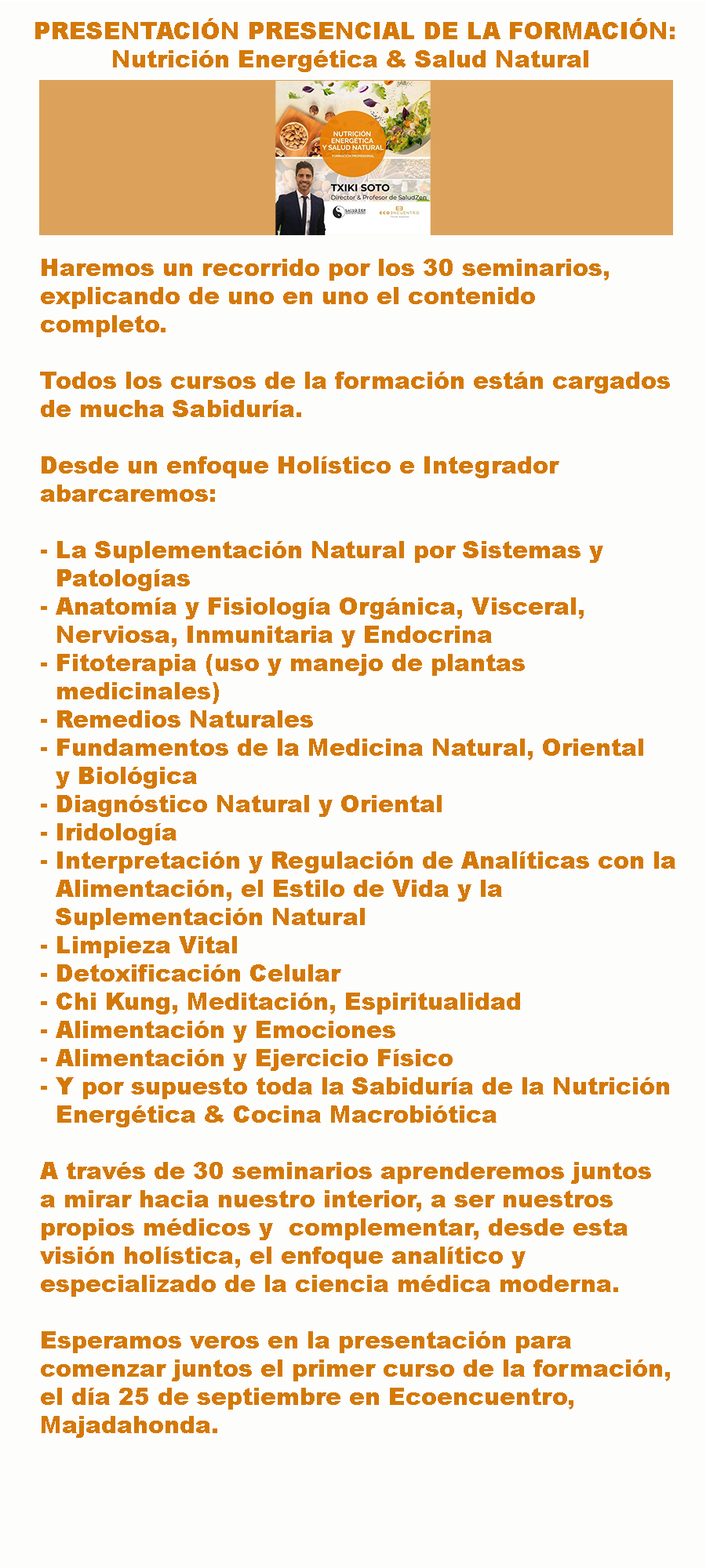
<style>
.page{position:relative;width:706px;height:1568px;background:#fdfdfc}
.page>*{position:absolute;margin:0}
.t1{font:23.5px "Arial-Black";color:#d47909}
</style>
<div class="page">
<p class="t1" style="left:35px;top:18px;width:639px;height:54px;text-align:center">PRESENTACIÓN PRESENCIAL DE LA FORMACIÓN:<br>Nutrición Energética &amp; Salud Natural</p>
<p class="t1" style="left:40px;top:259px;width:635px;height:1179px">Haremos un recorrido por los 30 seminarios, <br>explicando de uno en uno el contenido <br>completo.<br><br>Todos los cursos de la formación están cargados <br>de mucha Sabiduría. <br><br>Desde un enfoque Holístico e Integrador <br>abarcaremos:<br><br>- La Suplementación Natural por Sistemas y <br>  Patologías<br>- Anatomía y Fisiología Orgánica, Visceral, <br>  Nerviosa, Inmunitaria y Endocrina<br>- Fitoterapia (uso y manejo de plantas <br>  medicinales)<br>- Remedios Naturales<br>- Fundamentos de la Medicina Natural, Oriental <br>  y Biológica<br>- Diagnóstico Natural y Oriental<br>- Iridología<br>- Interpretación y Regulación de Analíticas con la <br>  Alimentación, el Estilo de Vida y la <br>  Suplementación Natural<br>- Limpieza Vital<br>- Detoxificación Celular<br>- Chi Kung, Meditación, Espiritualidad<br>- Alimentación y Emociones<br>- Alimentación y Ejercicio Físico<br>- Y por supuesto toda la Sabiduría de la Nutrición <br>  Energética &amp; Cocina Macrobiótica<br><br>A través de 30 seminarios aprenderemos juntos <br>a mirar hacia nuestro interior, a ser nuestros <br>propios médicos y  complementar, desde esta <br>visión holística, el enfoque analítico y <br>especializado de la ciencia médica moderna.<br><br>Esperamos veros en la presentación para <br>comenzar juntos el primer curso de la formación, <br>el día 25 de septiembre en Ecoencuentro, <br>Majadahonda.</p>
</div>
